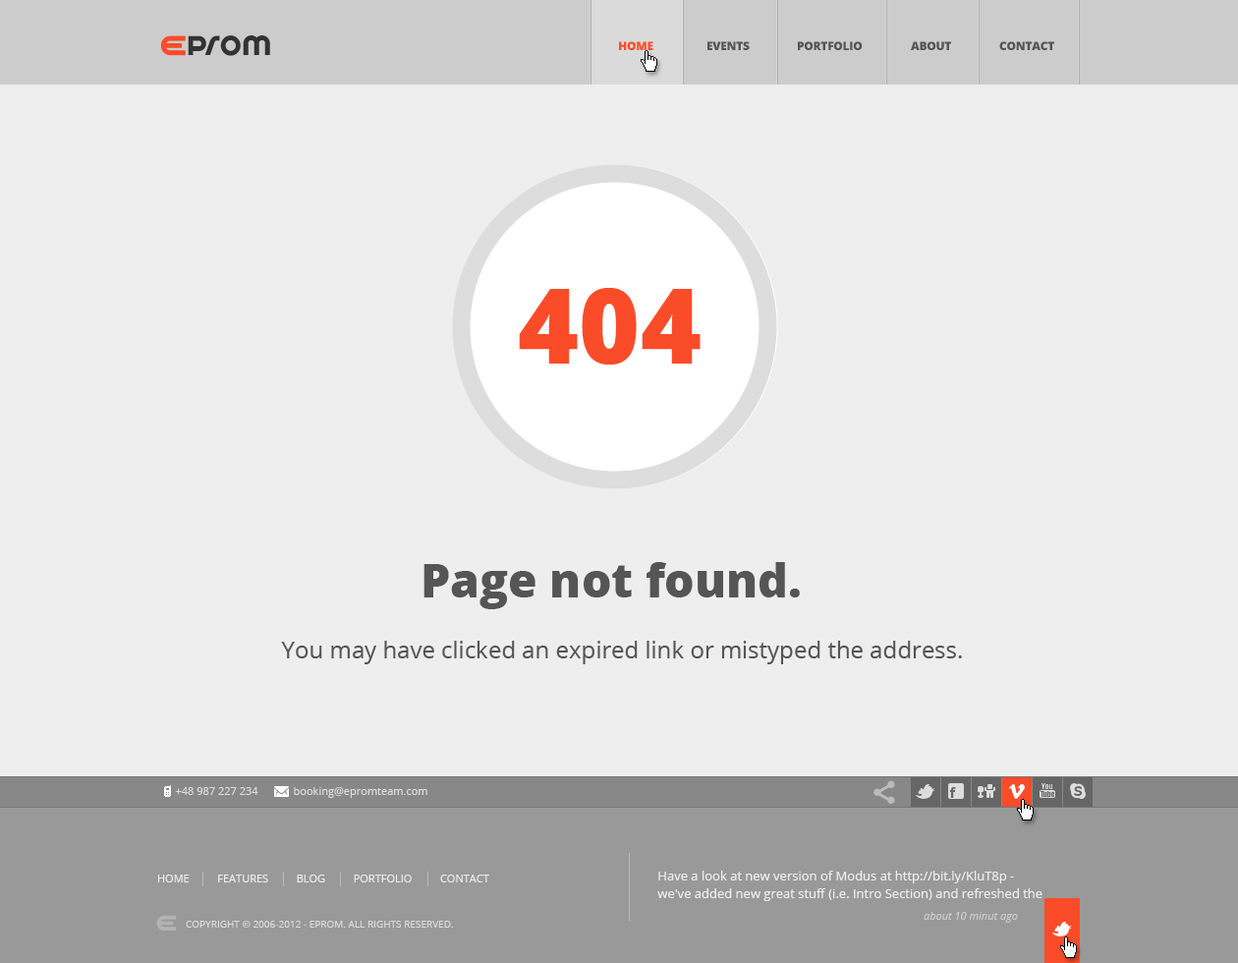
<style>
.page{position:relative;width:1238px;height:963px;background:#eeeeee}
.page>*{position:absolute;margin:0}
.t1{font:30.2px "SpinCycleOT";letter-spacing:0.025em;color:#333333}
.t2{font:11.8px "OpenSans-Extrabold";letter-spacing:-0.025em;color:#fa4c29;text-transform:uppercase}
.t3{font:11.8px "OpenSans-Extrabold";letter-spacing:-0.025em;color:#555555;text-transform:uppercase}
.t4{font:104px "OpenSans-Extrabold";color:#fa4c29}
.t5{font:47.2px "OpenSans-Extrabold";color:#555555}
.t6{font:23.6px "OpenSans";color:#555555}
.t7{font:10.8px "OpenSans";color:#dddddd}
.t8{font:10.8px "OpenSans";color:#eeeeee;text-transform:uppercase}
.t9{font:12.8px/17.7px "OpenSans";color:#eeeeee}
.t10{font:10.8px "OpenSans-Italic";color:#cccccc}
.t11{font:9.8px "OpenSans";color:#dddddd;text-transform:uppercase}
</style>
<div class="page">
<p class="t1" style="left:188px;top:35px;width:82px;height:21px">prom</p>
<p class="t2" style="left:619px;top:41px;width:34px;height:9px">Home</p>
<p class="t3" style="left:708px;top:41px;width:42px;height:9px">EVENTS</p>
<p class="t3" style="left:798px;top:41px;width:65px;height:9px">PORTFOLIO</p>
<p class="t3" style="left:911px;top:41px;width:40px;height:9px">ABOUT</p>
<p class="t3" style="left:999px;top:41px;width:55px;height:9px">Contact</p>
<p class="t4" style="left:519px;top:288px;width:182px;height:77px">404</p>
<p class="t5" style="left:424px;top:562px;width:376px;height:47px">Page not found.</p>
<p class="t6" style="left:281px;top:641px;width:681px;height:23px">You may have clicked an expired link or mistyped the address.</p>
<p class="t7" style="left:175px;top:787px;width:83px;height:8px">+48 987 227 234</p>
<p class="t7" style="left:294px;top:787px;width:133px;height:11px">booking@epromteam.com</p>
<p class="t8" style="left:158px;top:875px;width:331px;height:7px">Home          Features          Blog          Portfolio          Contact</p>
<p class="t9" style="left:657px;top:871px;width:386px;height:30px">Have a look at new version of Modus at http://bit.ly/KluT8p - we've added new great stuff (i.e. Intro Section) and refreshed the theme!</p>
<p class="t10" style="left:924px;top:912px;width:94px;height:11px">about 10 minut ago</p>
<p class="t11" style="left:186px;top:921px;width:267px;height:7px">Copyright © 2006-2012 - EPROM. All rights reserved.</p>
</div>
